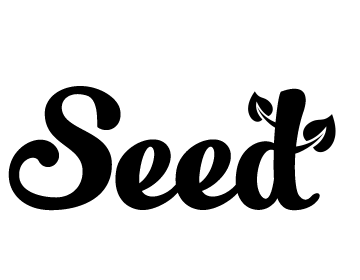
<style>
.page{position:relative;width:360px;height:280px;background:#ffffff}
.page>*{position:absolute;margin:0}
.t1{font:124px "SlimTony";color:#000000}
</style>
<div class="page">
<p class="t1" style="left:8px;top:86px;width:312px;height:125px">Seed</p>
</div>
